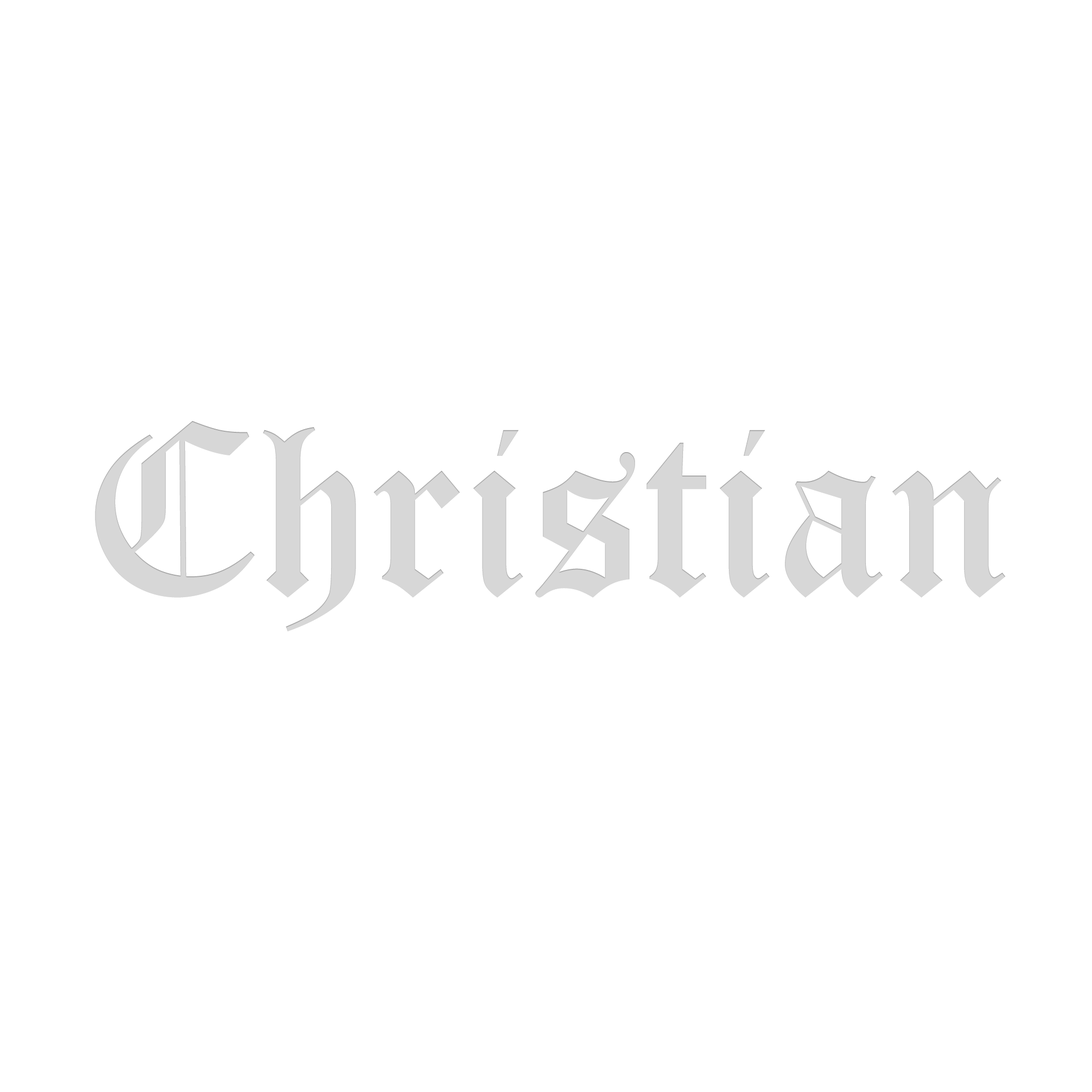
<style>
.page{position:relative;width:1092px;height:1092px;background:#ffffff}
.page>*{position:absolute;margin:0}
.t1{font:243.1px "OldEnglishTextMT";color:#d7d7d7}
</style>
<div class="page">
<p class="t1" style="left:95px;top:421px;width:911px;height:210px">Christian</p>
</div>
